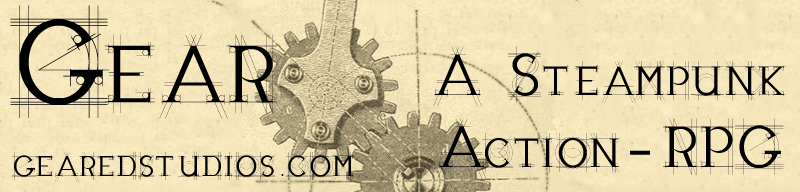
<style>
.page{position:relative;width:800px;height:192px}
.page>*{position:absolute;margin:0}
.t1{font:120px "JBEtude-Regular";color:#000000;font-variant:small-caps}
.t2{font:120px "JBEtude-Regular";color:#000000}
.t3{font:60px "JBEtude-Regular";color:#000000;font-variant:small-caps}
.t4{font:30px "JBEtude-Regular";color:#000000;font-variant:small-caps}
</style>
<div class="page">
<p class="t1" style="left:10px;top:5px;width:267px;height:114px"><span class="t2">G</span>ear</p>
<p class="t3" style="left:433px;top:46px;width:353px;height:133px;text-align:center">A Steampunk Action-RPG</p>
<p class="t4" style="left:12px;top:151px;width:343px;height:31px">GEAREDSTUDIOS.COM</p>
</div>
